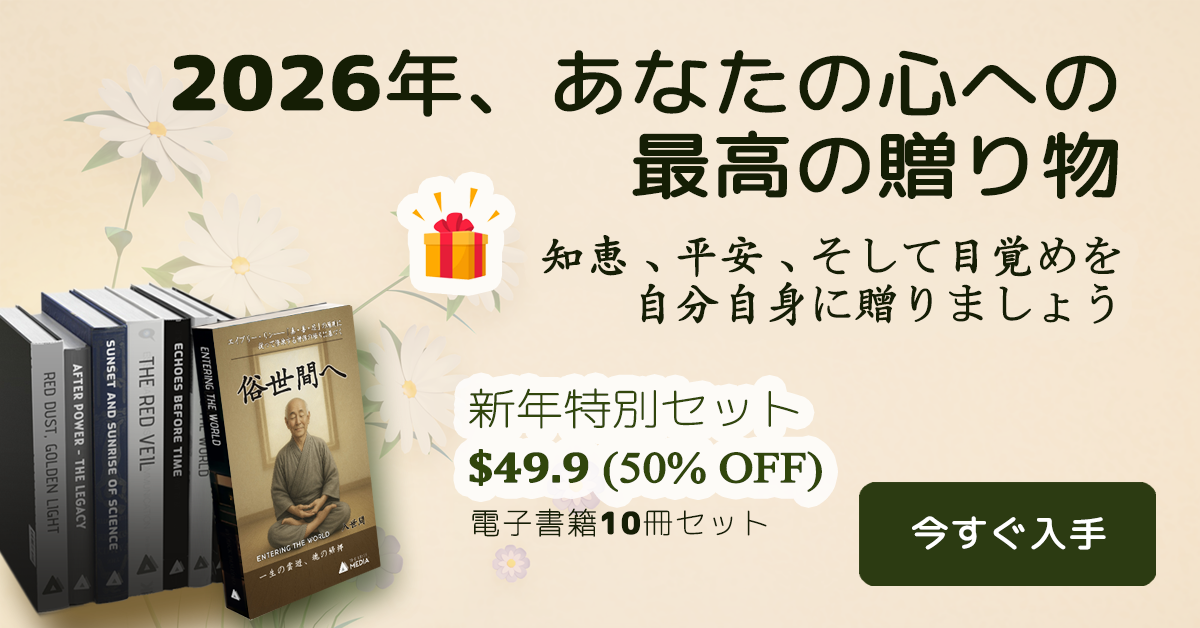
<style>
.page{position:relative;width:1200px;height:628px}
.page>*{position:absolute;margin:0}
.t1{font:72.4px/82.2px "RoundedMplus1c-Regular";letter-spacing:-0.005em;color:#151e05;font-weight:bold;scale:1.11 1}
.t2{font:72.4px/82.2px "RoundedMplus1c-ExtraBold";letter-spacing:-0.005em;color:#151e05;font-weight:bold;scale:1.11 1}
.t3{font:44px/48px "CN-Khai3.0";letter-spacing:-0.005em;color:#151e05;font-weight:bold}
.t4{font:43.2px/57.6px "TimesNewRomanPSMT";letter-spacing:-0.025em;color:#31460c;font-weight:bold;scale:1.11 1}
.t5{font:43.2px/57.6px "RoundedMplus1c-Thin";letter-spacing:-0.025em;color:#31460c;font-weight:bold;scale:1.11 1}
.t6{font:43.2px/57.6px "Cambria-Bold";letter-spacing:-0.025em;color:#31460c;font-weight:bold;scale:1.11 1}
.t7{font:30px "RoundedMplus1c-Thin";letter-spacing:0.05em;color:#151e05;font-weight:bold}
.t8{font:30px "RoundedMplus1c-ExtraBold";letter-spacing:0.05em;color:#151e05;font-weight:bold}
.t9{font:36.1px "RoundedMplus1c-Regular";letter-spacing:0.01em;color:#ffffff;font-weight:bold;scale:1.06 1}
</style>
<div class="page">
<p class="t1" style="left:172px;top:49px;width:946px;height:151px;text-align:right"><span class="t2">2026</span>年、あなたの心への<br>最高の贈り物</p>
<p class="t3" style="left:541px;top:235px;width:580px;height:91px;text-align:right">知恵、平安、そして目覚めを<br>自分自身に贈りましょう</p>
<p class="t4" style="left:469px;top:388px;width:353px;height:104px"><span class="t5">新年特別セット<br></span><span class="t6">$49.9</span> (50% OFF)</p>
<p class="t7" style="left:472px;top:508px;width:295px;height:29px">電子書籍<span class="t8">10</span>冊セット</p>
<p class="t9" style="left:912px;top:516px;width:194px;height:34px">今すぐ入手</p>
</div>
